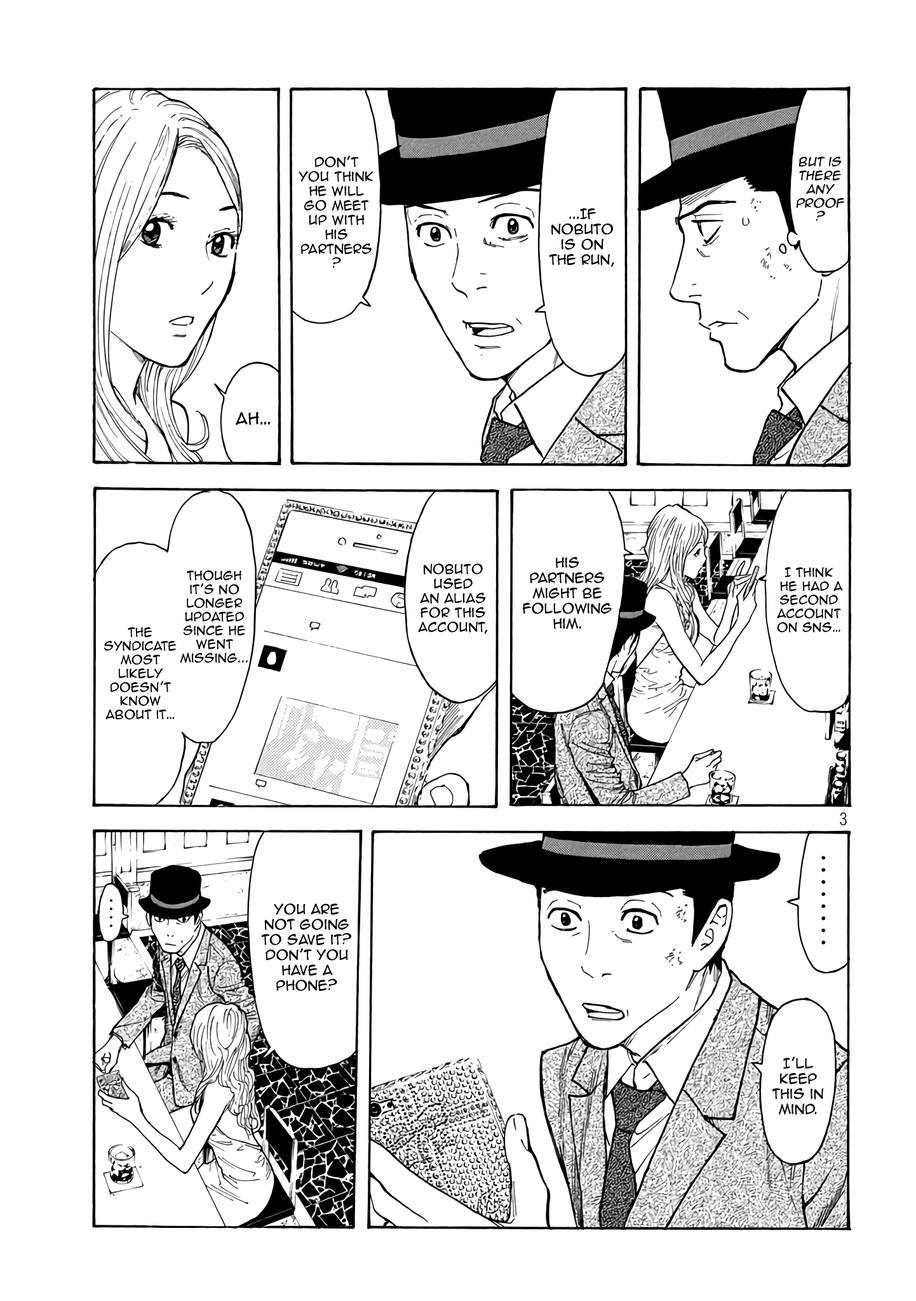
<style>
.page{position:relative;width:916px;height:1301px;background:#ffffff}
.page>*{position:absolute;margin:0}
.t1{font:12.1px "AnimeAce2.0BB";color:#000000}
.t2{font:11.4px "AnimeAce2.0BB";color:#000000;font-style:italic}
.t3{font:12.7px "AnimeAce2.0BB";color:#000000}
.t4{font:15.3px "AnimeAce2.0BB";color:#000000}
.t5{font:11.4px "AnimeAce2.0BB";color:#000000}
</style>
<div class="page">
<p class="t1" style="left:299px;top:156px;width:75px;height:112px;text-align:center">Don’t <br>you think he will go meet up with his partners?</p>
<p class="t2" style="left:796px;top:156px;width:48px;height:65px;text-align:center">But is there any proof?</p>
<p class="t3" style="left:549px;top:208px;width:65px;height:59px;text-align:center">...If <br>Nobuto is on <br>the run,</p>
<p class="t4" style="left:236px;top:412px;width:34px;height:14px">Ah…</p>
<p class="t3" style="left:523px;top:557px;width:89px;height:73px;text-align:center">His partners might be following him.</p>
<p class="t1" style="left:418px;top:564px;width:69px;height:70px;text-align:center">Nobuto used<br>an alias <br>for this account,</p>
<p class="t5" style="left:777px;top:567px;width:66px;height:66px;text-align:center">I think<br> he had a second account on SNS…</p>
<p class="t5" style="left:180px;top:571px;width:68px;height:92px;text-align:center">Though it’s no longer updated  since he went missing...</p>
<p class="t5" style="left:104px;top:627px;width:73px;height:93px;text-align:center">The syndicate most likely doesn’t know about it…</p>
<p class="t3" style="left:261px;top:904px;width:90px;height:87px;text-align:center">you are not going <br>to save it? Don’t you have a phone?</p>
<p class="t3" style="left:772px;top:1057px;width:52px;height:58px;text-align:center">I’ll <br>keep this in mind.</p>
</div>
